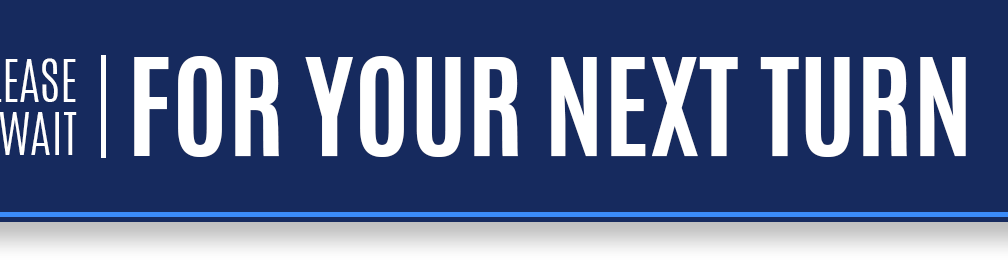
<style>
.page{position:relative;width:1008px;height:260px;background:#162a5e}
.page>*{position:absolute;margin:0}
.t1{font:115px "Antonio-Bold";color:#ffffff}
</style>
<div class="page">
<p class="t1" style="left:134px;top:56px;width:832px;height:101px">FOR YOUR NEXT TURN</p>
</div>
